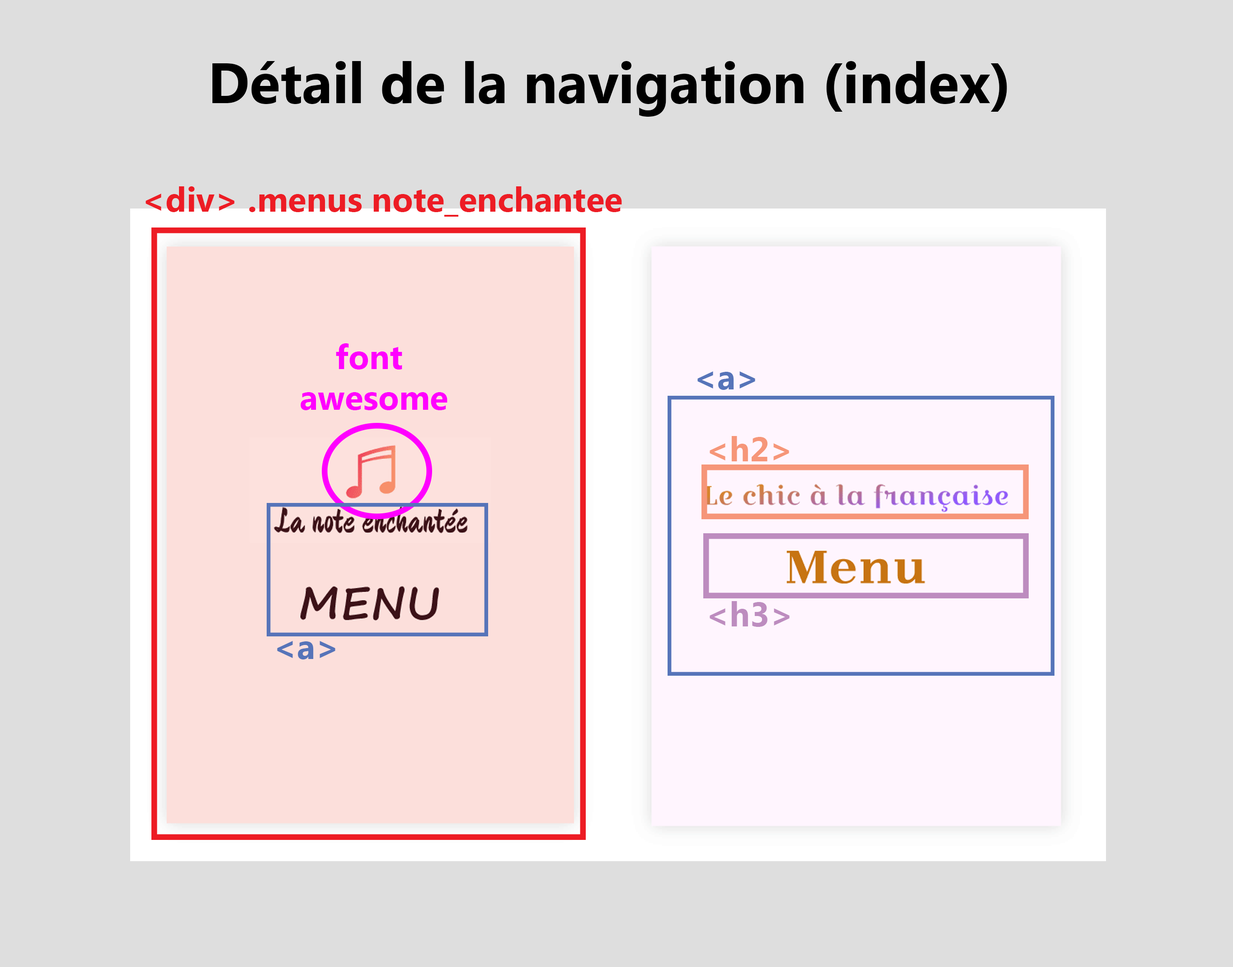
<style>
.page{position:relative;width:1233px;height:967px;background:#dedede}
.page>*{position:absolute;margin:0}
.t1{font:56.5px "MicrosoftNewTaiLue-Bold";color:#000000}
.t2{font:33.9px "MicrosoftNewTaiLue-Bold";color:#ed1c24}
.t3{font:33.9px "MicrosoftNewTaiLue-Bold";color:#ff00ff}
.t4{font:33.9px "MicrosoftNewTaiLue-Bold";color:#5674b9}
.t5{font:33.9px "MicrosoftNewTaiLue-Bold";color:#f69679}
.t6{font:33.9px "MicrosoftNewTaiLue-Bold";color:#bd8cbf}
</style>
<div class="page">
<p class="t1" style="left:212px;top:61px;width:795px;height:56px">Détail de la navigation (index)</p>
<p class="t2" style="left:146px;top:186px;width:476px;height:31px">&lt;div&gt; .menus note_enchantee</p>
<p class="t3" style="left:301px;top:343px;width:147px;height:67px;text-align:center">font <br>awesome</p>
<p class="t4" style="left:698px;top:371px;width:58px;height:19px">&lt;a&gt;</p>
<p class="t5" style="left:710px;top:436px;width:79px;height:25px">&lt;h2&gt;</p>
<p class="t6" style="left:710px;top:601px;width:80px;height:26px">&lt;h3&gt;</p>
<p class="t4" style="left:277px;top:641px;width:59px;height:18px">&lt;a&gt;</p>
</div>
